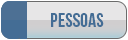
<style>
.page{position:relative;width:128px;height:40px;background:#e7e6e7}
.page>*{position:absolute;margin:0}
.t1{font:20px "BebasNeue";color:#446d95}
</style>
<div class="page">
<p class="t1" style="left:51px;top:13px;width:53px;height:14px">pessoas</p>
</div>
